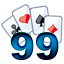
<style>
.page{position:relative;width:64px;height:64px;background:#ffffff}
.page>*{position:absolute;margin:0}
.t1{font:37.6px "Arial-Black"}
</style>
<div class="page">
<p class="t1" style="left:11px;top:32px;width:48px;height:28px">99</p>
</div>
